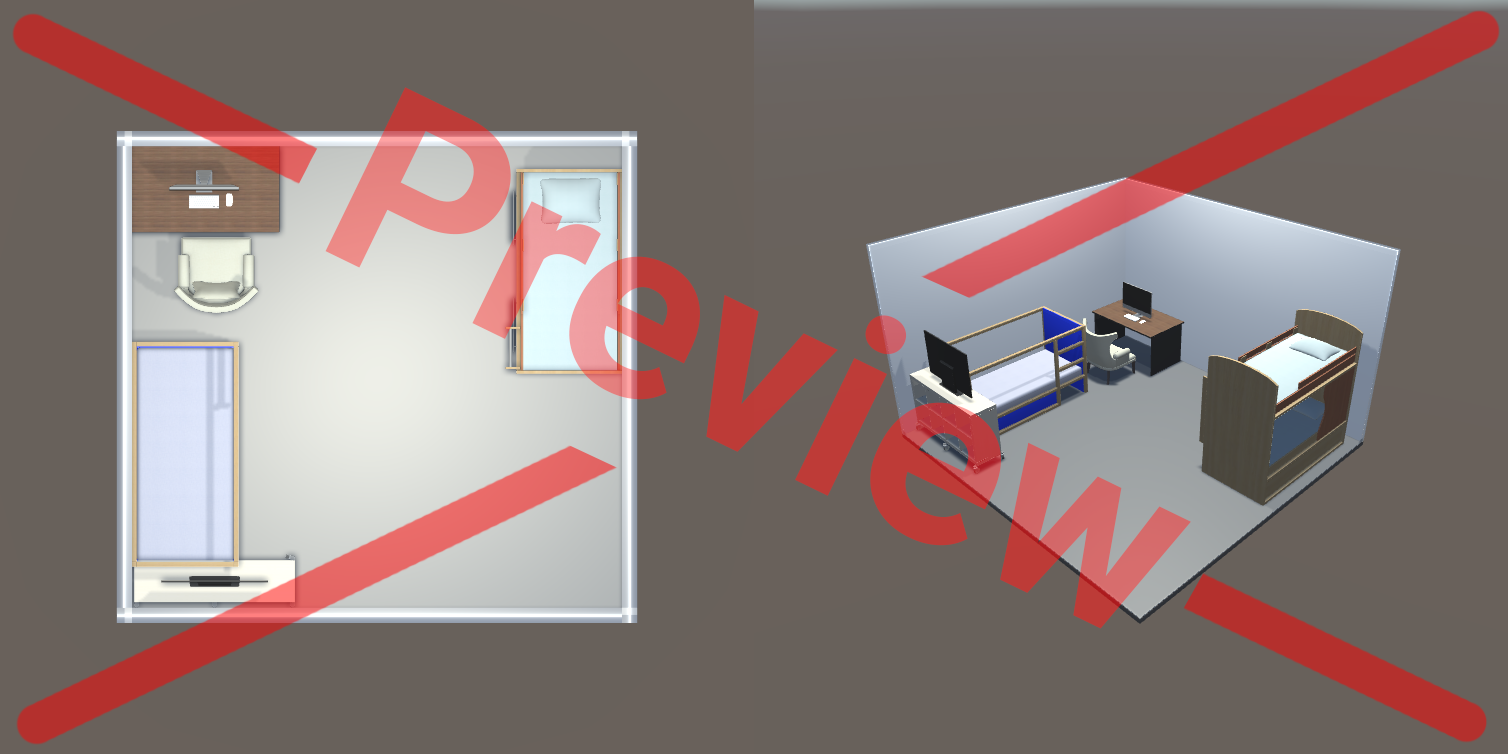
<style>
.page{position:relative;width:1508px;height:754px;background:#68615b}
.page>*{position:absolute;margin:0}
.t1{font:256px "Roboto-Bold"}
</style>
<div class="page">
<p class="t1" style="left:325px;top:87px;width:866px;height:542px;rotate:26deg">Preview</p>
</div>
